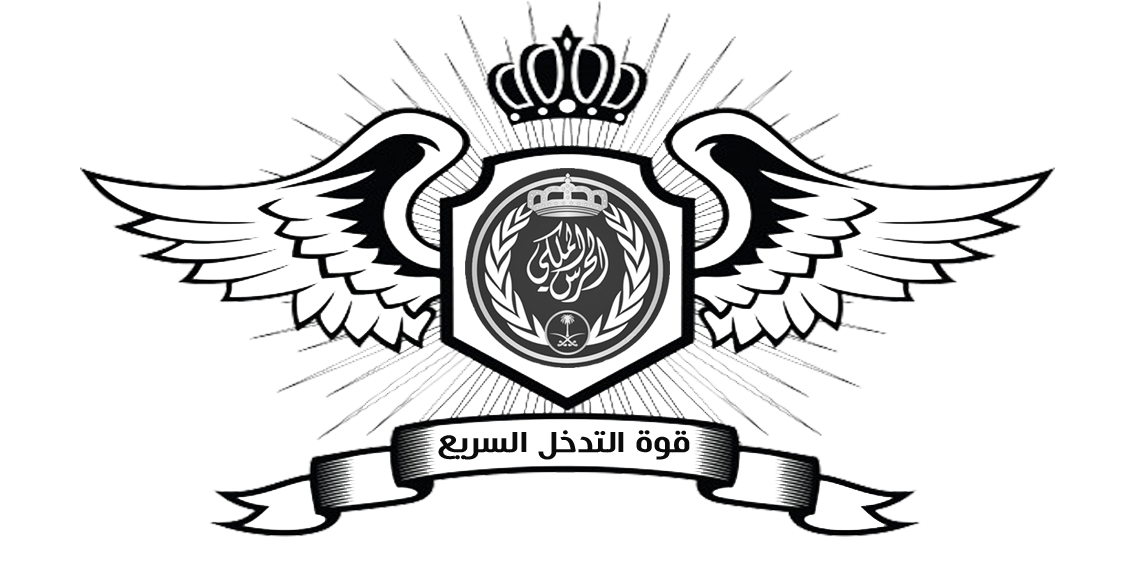
<style>
.page{position:relative;width:1134px;height:587px;background:#ffffff}
.page>*{position:absolute;margin:0}
.t1{font:32.5px "HacenAlgeriaBd";color:#0b0b0b;scale:1.17 1}
</style>
<div class="page">
<p class="t1" style="left:438px;top:430px;width:252px;height:30px">قوة التدخل السريع</p>
</div>
